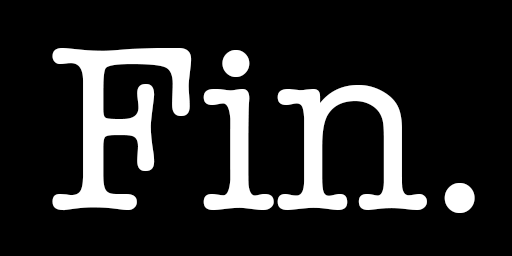
<style>
.page{position:relative;width:512px;height:256px;background:#000000}
.page>*{position:absolute;margin:0}
.t1{font:240px "AmericanTypewriter";color:#ffffff}
</style>
<div class="page">
<p class="t1" style="left:52px;top:48px;width:423px;height:165px">Fin.</p>
</div>
